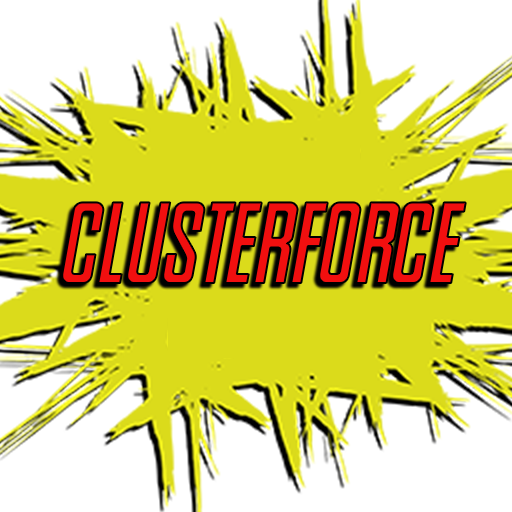
<style>
.page{position:relative;width:512px;height:512px;background:#ffffff}
.page>*{position:absolute;margin:0}
.t1{font:115px "SNES-Italic";color:#f10f0f}
</style>
<div class="page">
<p class="t1" style="left:62px;top:202px;width:404px;height:81px">Clusterforce</p>
</div>
